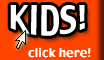
<style>
.page{position:relative;width:104px;height:60px;background:#ff4400}
.page>*{position:absolute;margin:0}
.t1{font:30px "Charcoal";color:#ffffff}
.t2{font:12px "Charcoal";color:#ffffff}
</style>
<div class="page">
<p class="t1" style="left:10px;top:5px;width:75px;height:31px">KIDS!</p>
<p class="t2" style="left:28px;top:47px;width:63px;height:11px">click here!</p>
</div>
